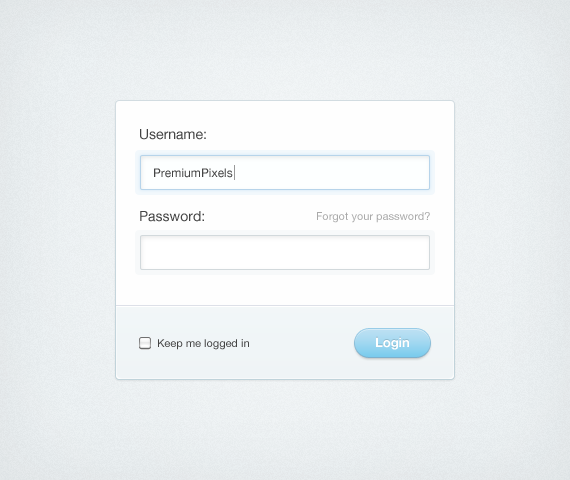
<style>
.page{position:relative;width:570px;height:480px}
.page>*{position:absolute;margin:0}
.t1{font:14px "HelveticaNeue";color:#444444}
.t2{font:12px "HelveticaNeue";color:#444444}
.t3{font:11px "HelveticaNeue";color:#ababab}
.t4{font:11px "HelveticaNeue";color:#444444}
.t5{font:13px "HelveticaNeue-Bold";color:#ffffff}
</style>
<div class="page">
<p class="t1" style="left:140px;top:129px;width:66px;height:11px">Username:</p>
<p class="t2" style="left:154px;top:168px;width:79px;height:10px">PremiumPixels</p>
<p class="t1" style="left:140px;top:211px;width:64px;height:11px">Password:</p>
<p class="t3" style="left:317px;top:212px;width:113px;height:11px">Forgot your password?</p>
<p class="t4" style="left:158px;top:339px;width:91px;height:11px">Keep me logged in</p>
<p class="t5" style="left:376px;top:337px;width:33px;height:13px">Login</p>
</div>
